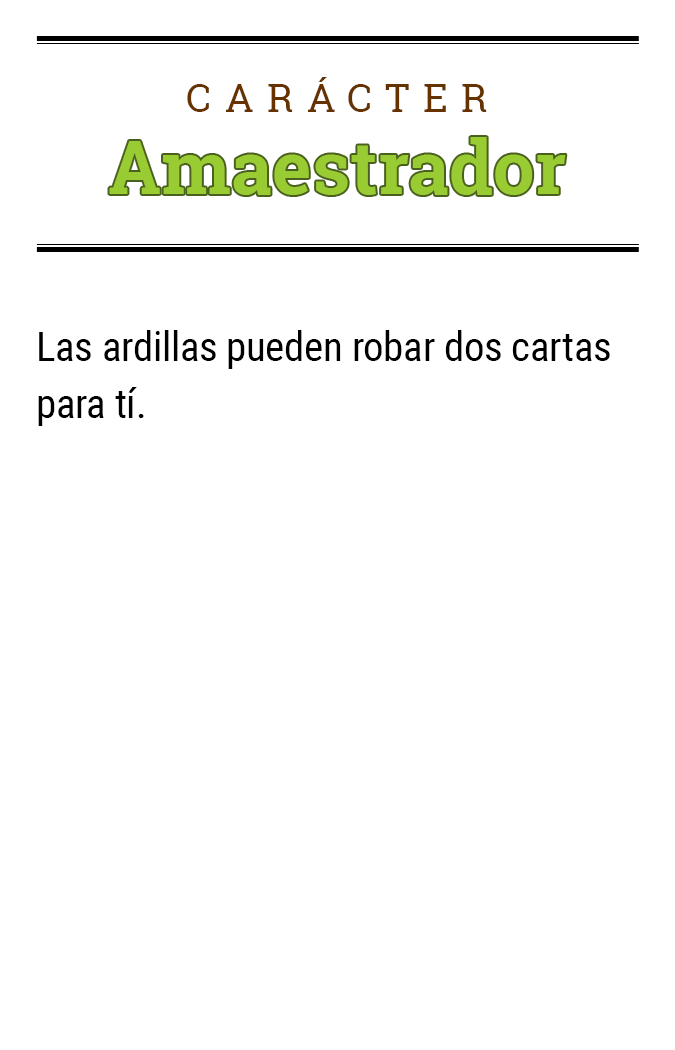
<style>
.page{position:relative;width:675px;height:1050px;background:#ffffff}
.page>*{position:absolute;margin:0}
.t1{font:39.2px "RobotoSlab-Regular";letter-spacing:0.34em;color:#663300}
.t2{font:74.5px "RobotoSlab-Bold";color:#99cc33}
.t3{font:41.1px/57.1px "RobotoCondensed-Regular";letter-spacing:-0.01em;color:#000000}
</style>
<div class="page">
<p class="t1" style="left:187px;top:77px;width:300px;height:35px">CARÁCTER</p>
<p class="t2" style="left:109px;top:137px;width:457px;height:58px">Amaestrador</p>
<p class="t3" style="left:38px;top:330px;width:572px;height:96px">Las ardillas pueden robar dos cartas para tí.</p>
</div>
